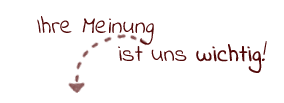
<style>
.page{position:relative;width:284px;height:103px;background:#ffffff}
.page>*{position:absolute;margin:0}
.t1{font:18px "IndieFlower";color:#520909;font-style:italic}
.t2{font:18px "IndieFlower";color:#520909}
.t3{font:18px "IndieFlower";color:#520909;font-weight:bold}
</style>
<div class="page">
<p class="t1" style="left:37px;top:16px;width:230px;height:57px"><span class="t2">Ihre </span>Meinung <br>         <span class="t2">ist uns </span><span class="t3">wichtig</span>!</p>
</div>
